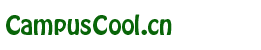
<style>
.page{position:relative;width:261px;height:50px;background:#ffffff}
.page>*{position:absolute;margin:0}
.t1{font:24px "HoboStd";color:#096509}
</style>
<div class="page">
<p class="t1" style="left:6px;top:14px;width:166px;height:21px">CampusCool.cn</p>
</div>
